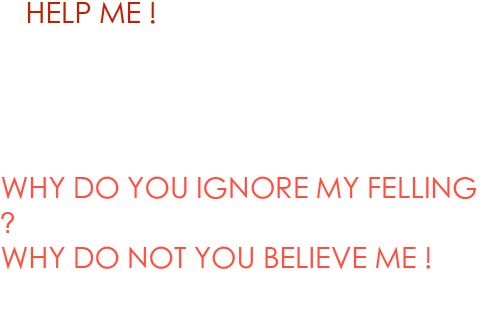
<style>
.page{position:relative;width:497px;height:336px;background:#ffffff}
.page>*{position:absolute;margin:0}
.t1{font:29.2px "AdobeSongStd-Light";color:#bf2000}
.t2{font:29.2px "AdobeSongStd-Light";color:#ff4f3f}
</style>
<div class="page">
<p class="t1" style="left:27px;top:2px;width:128px;height:22px">HELP ME !</p>
<p class="t2" style="left:1px;top:176px;width:475px;height:93px">WHY DO YOU IGNORE MY FELLING ?<br>WHY DO NOT YOU BELIEVE ME !</p>
</div>
